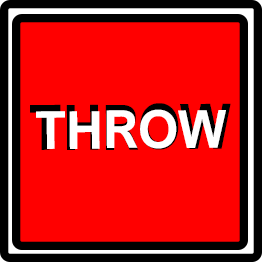
<style>
.page{position:relative;width:263px;height:263px;background:#ff0000}
.page>*{position:absolute;margin:0}
.t1{font:62.9px "ArialNova-Bold";scale:0.87 1}
.t2{font:52.4px "ArialNova-Bold";color:#ffffff}
</style>
<div class="page">
<p class="t1" style="left:30px;top:103px;width:201px;height:47px">THROW</p>
<p class="t2" style="left:36px;top:109px;width:190px;height:40px">THROW</p>
</div>
